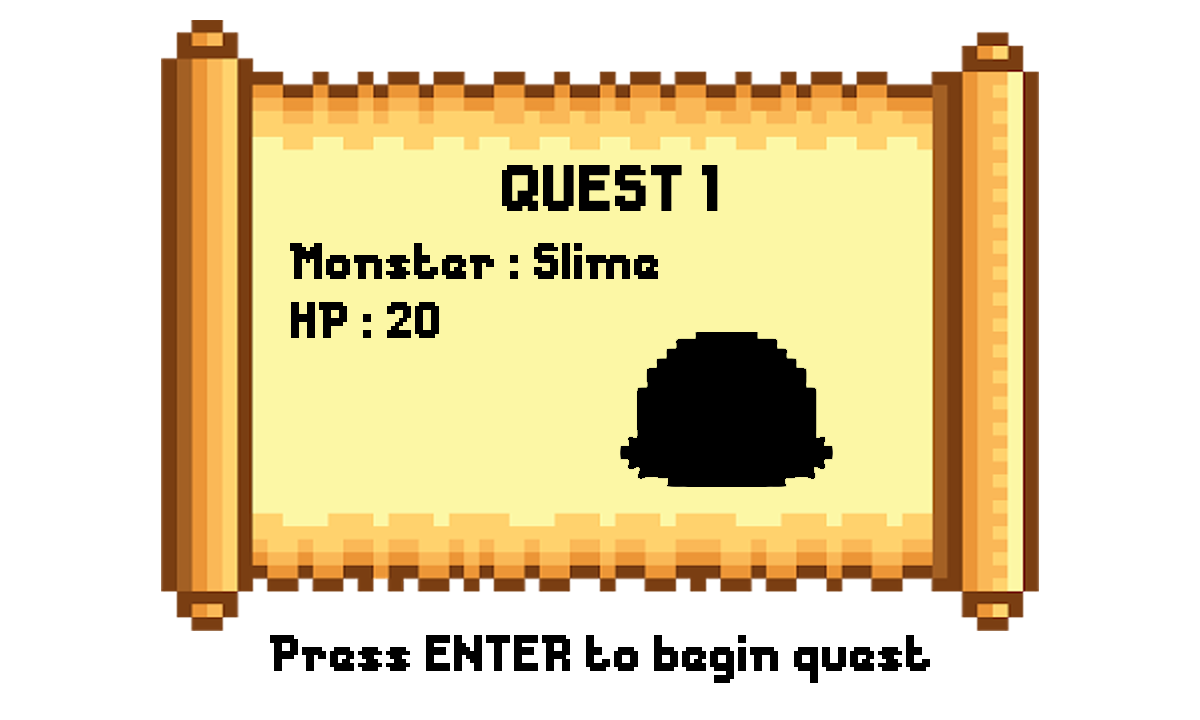
<style>
.page{position:relative;width:1200px;height:720px;background:#ffffff}
.page>*{position:absolute;margin:0}
.t1{font:61.3px "Messe-Duesseldorf";color:#000000}
.t2{font:48px "Messe-Duesseldorf";color:#000000}
</style>
<div class="page">
<p class="t1" style="left:502px;top:165px;width:216px;height:46px">QUEST 1</p>
<p class="t2" style="left:290px;top:243px;width:368px;height:36px">Monster : Slime</p>
<p class="t2" style="left:291px;top:302px;width:148px;height:36px">HP : 20</p>
<p class="t2" style="left:270px;top:635px;width:660px;height:48px">Press ENTER to begin quest</p>
</div>
